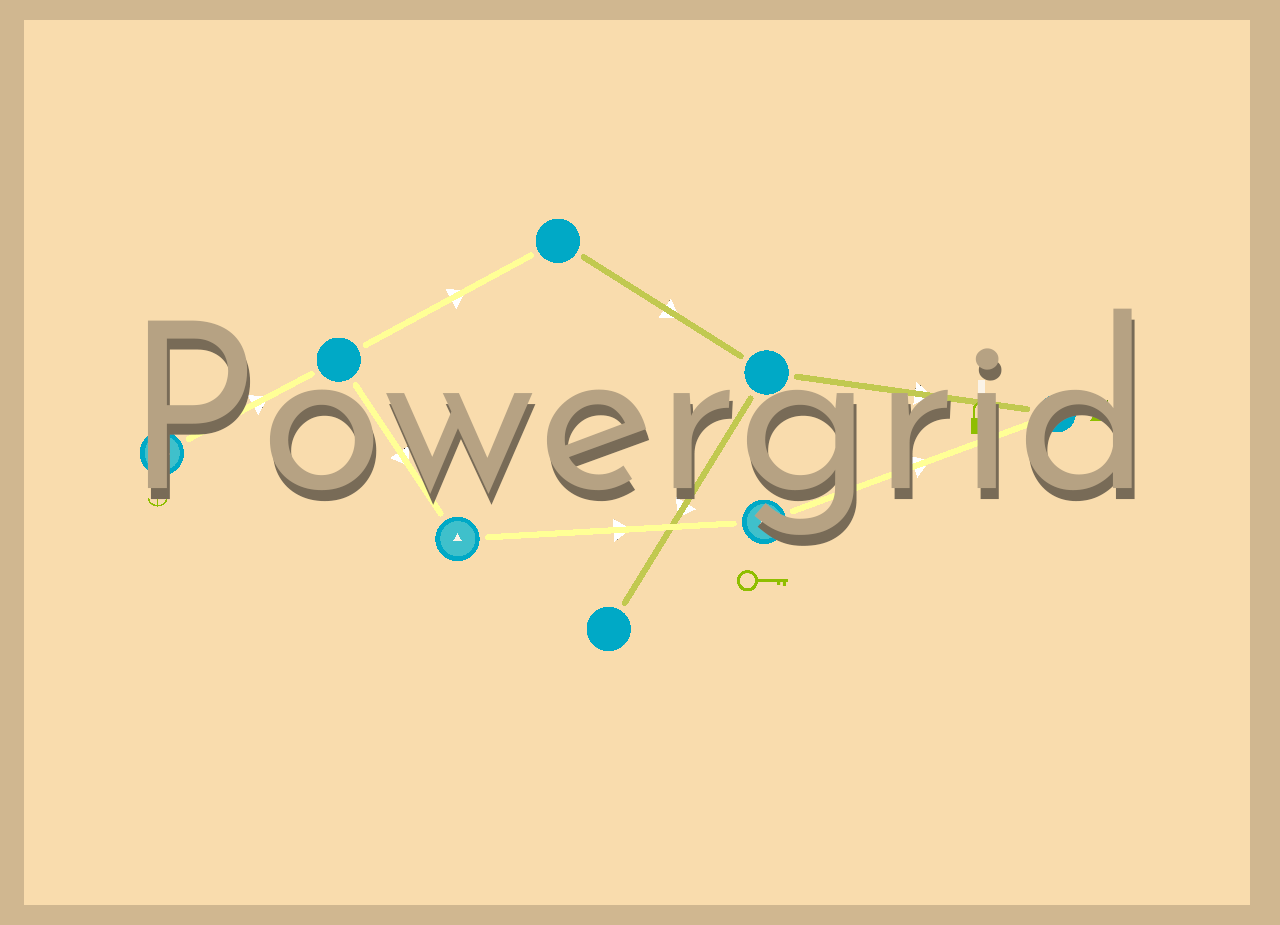
<style>
.page{position:relative;width:1280px;height:925px;background:#f9dcad}
.page>*{position:absolute;margin:0}
.t1{font:400px "JosefinSans_367.000wght";color:#b6a283}
.t2{font:400px "JosefinSans_367.000wght"}
</style>
<div class="page">
<p class="t1" style="left:147px;top:308px;width:985px;height:227px">Powergrid</p>
<p class="t2" style="left:150px;top:319px;width:985px;height:227px">Powergrid</p>
</div>
